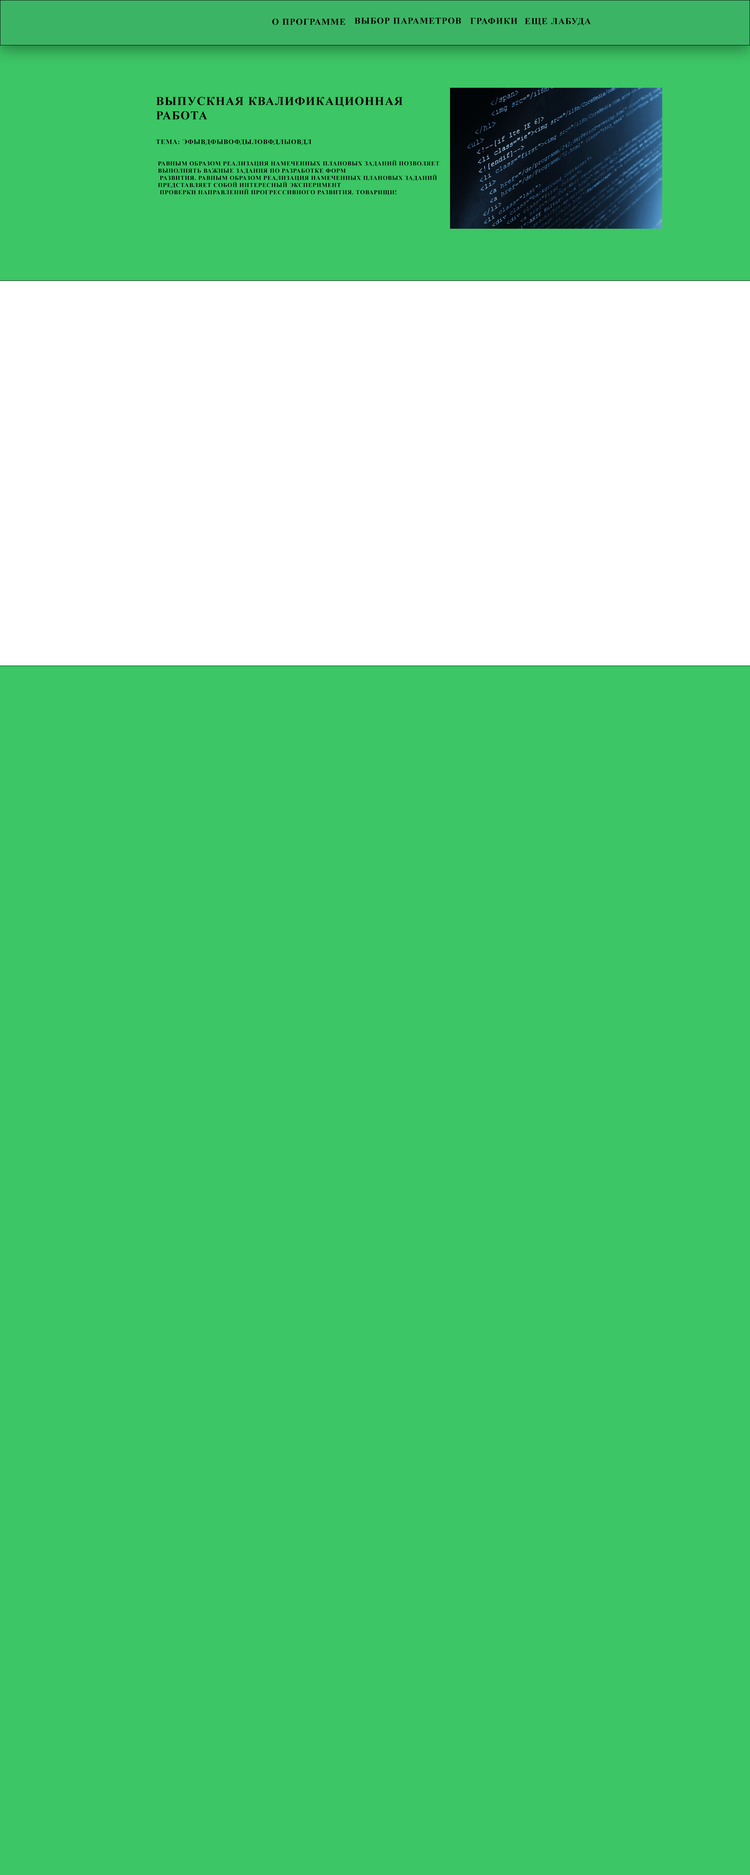
<style>
.page{position:relative;width:750px;height:1875px;background:#3cc665}
.page>*{position:absolute;margin:0}
.t1{font:9px "TimesNewRomanPS-BoldMT";letter-spacing:0.06em;color:#000000;text-transform:uppercase}
.t2{font:12px "TimesNewRomanPS-BoldMT";letter-spacing:0.06em;color:#000000;text-transform:uppercase}
.t3{font:6.8px "TimesNewRomanPS-BoldMT";letter-spacing:0.06em;color:#000000;text-transform:uppercase}
.t4{font:6px "TimesNewRomanPS-BoldMT";letter-spacing:0.06em;color:#000000;text-transform:uppercase}
</style>
<div class="page">
<p class="t1" style="left:354px;top:18px;width:107px;height:6px">Выбор параметров</p>
<p class="t1" style="left:470px;top:18px;width:48px;height:6px">графики</p>
<p class="t1" style="left:272px;top:18px;width:73px;height:7px">О программе</p>
<p class="t1" style="left:525px;top:18px;width:66px;height:8px">еще лабуда</p>
<p class="t2" style="left:156px;top:97px;width:247px;height:23px">Выпускная квалификационная<br>работа</p>
<p class="t3" style="left:156px;top:139px;width:156px;height:7px">тема: Эфывдфывофдыловфдлыовдл</p>
<p class="t4" style="left:158px;top:160px;width:282px;height:35px">Равным образом реализация намеченных плановых заданий позволяет <br>выполнять важные задания по разработке форм<br> развития. Равным образом реализация намеченных плановых заданий <br>представляет собой интересный эксперимент<br> проверки направлений прогрессивного развития. Товарищи!</p>
</div>
